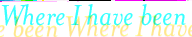
<style>
.page{position:relative;width:192px;height:37px;background:#ffffff}
.page>*{position:absolute;margin:0}
.t1{font:33.3px "MrsEavesItalic";color:#37ffff}
</style>
<div class="page">
<p class="t1" style="left:1px;top:4px;width:185px;height:22px">Where I have been</p>
</div>
